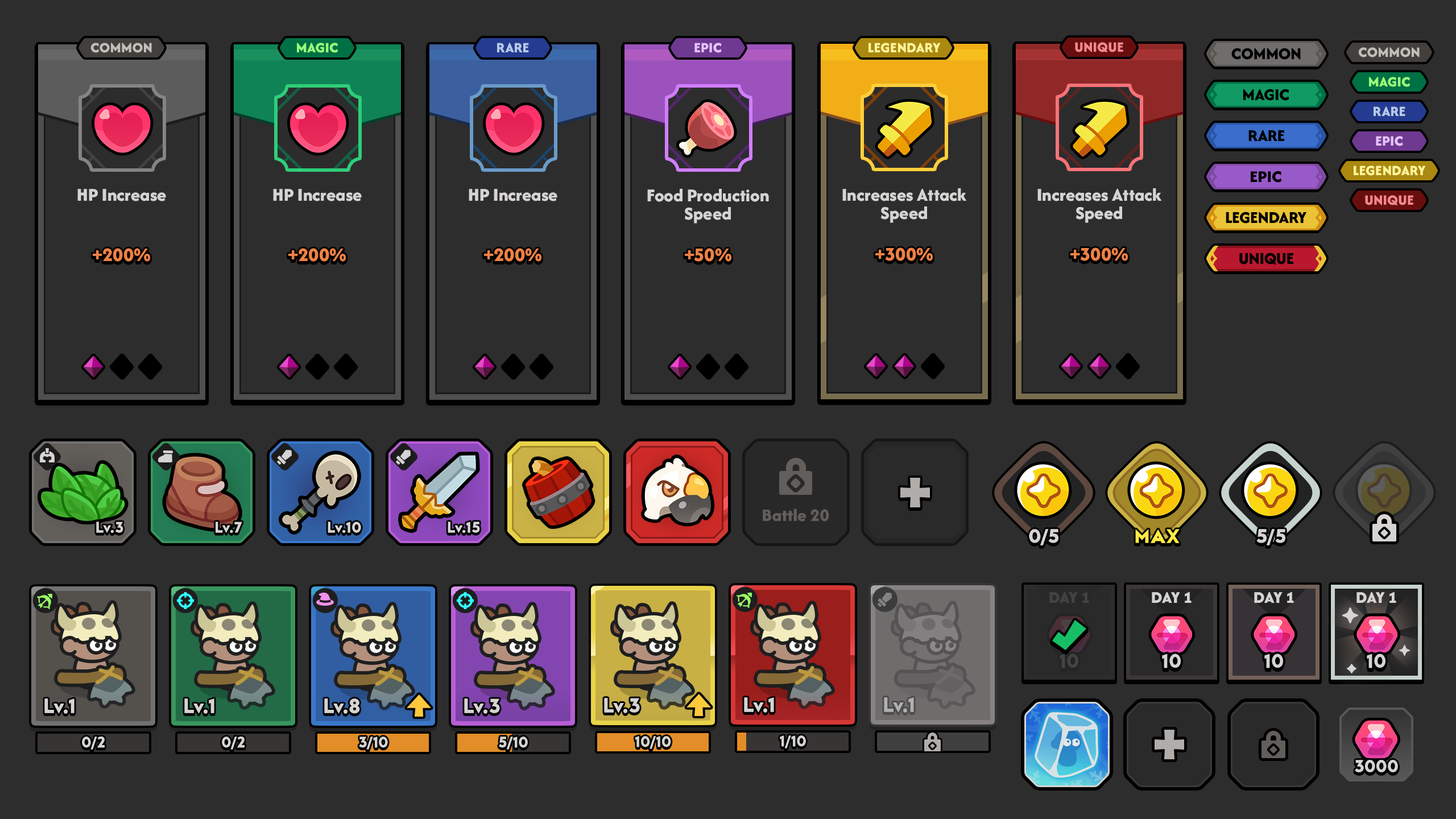
<style>
.page{position:relative;width:1456px;height:819px;background:#2d2d2d}
.page>*{position:absolute;margin:0}
.t1{font:14.8px "AfacadFlux-ExtraBold";color:#c1beba;text-transform:uppercase}
.t2{font:14.8px "AfacadFlux-ExtraBold";color:#99ff79;text-transform:uppercase}
.t3{font:14.8px "AfacadFlux-ExtraBold";color:#b6c8e6;text-transform:uppercase}
.t4{font:14.8px "AfacadFlux-ExtraBold";color:#e6c1ff;text-transform:uppercase}
.t5{font:14.8px "AfacadFlux-ExtraBold";color:#fff59a;text-transform:uppercase}
.t6{font:14.8px "AfacadFlux-ExtraBold";color:#f4868b;text-transform:uppercase}
.t7{font:17.2px "AfacadFlux-ExtraBold";letter-spacing:-0.02em;color:#000000;text-transform:uppercase}
.t8{font:17.1px "AfacadFlux-ExtraBold";color:#000000;text-transform:uppercase}
.t9{font:18.8px "AfacadFlux-ExtraBold";color:#d6d4d3}
.t10{font:18.8px/18.2px "AfacadFlux-ExtraBold";color:#d6d4d3}
.t11{font:19.9px "AfacadFlux-ExtraBold";color:#ee8145;text-transform:uppercase}
.t12{font:18.2px "AfacadFlux-ExtraBold";color:#625e5b}
.t13{font:15.9px "LTAvocado-Bold";color:#d6d4d3}
.t14{font:20.5px "LTAvocado-Bold";color:#d6d4d3;text-transform:uppercase}
.t15{font:20.5px "LTAvocado-Bold";color:#ffeb44;text-transform:uppercase}
.t16{font:17.1px "AfacadFlux-ExtraBold";color:#444343;text-transform:uppercase}
.t17{font:17.1px "AfacadFlux-ExtraBold";color:#d6d4d3;text-transform:uppercase}
.t18{font:20.5px "LTAvocado-Bold";color:#444343}
.t19{font:20.5px "LTAvocado-Bold";color:#d6d4d3}
.t20{font:21.3px "LTAvocado-Bold";color:#d6d4d3}
.t21{font:21.3px "LTAvocado-Bold";color:#b1b0b0}
.t22{font:18.2px "LTAvocado-Bold";color:#d6d4d3;text-transform:uppercase}
</style>
<div class="page">
<p class="t1" style="left:90px;top:43px;width:62px;height:10px">Common</p>
<p class="t2" style="left:297px;top:43px;width:41px;height:10px">Magic</p>
<p class="t3" style="left:497px;top:43px;width:32px;height:9px">Rare</p>
<p class="t4" style="left:694px;top:43px;width:28px;height:10px">Epic</p>
<p class="t5" style="left:868px;top:43px;width:73px;height:10px">Legendary</p>
<p class="t6" style="left:1075px;top:42px;width:48px;height:10px">Unique</p>
<p class="t7" style="left:1231px;top:48px;width:70px;height:12px">Common</p>
<p class="t1" style="left:1358px;top:47px;width:62px;height:10px">Common</p>
<p class="t2" style="left:1369px;top:77px;width:41px;height:10px">Magic</p>
<p class="t7" style="left:1243px;top:89px;width:46px;height:12px">Magic</p>
<p class="t3" style="left:1374px;top:106px;width:31px;height:10px">Rare</p>
<p class="t7" style="left:1248px;top:130px;width:36px;height:11px">Rare</p>
<p class="t4" style="left:1376px;top:136px;width:27px;height:10px">Epic</p>
<p class="t8" style="left:1251px;top:171px;width:31px;height:12px">Epic</p>
<p class="t5" style="left:1354px;top:166px;width:72px;height:10px">Legendary</p>
<p class="t9" style="left:77px;top:189px;width:89px;height:12px">HP Increase</p>
<p class="t9" style="left:273px;top:189px;width:89px;height:12px">HP Increase</p>
<p class="t9" style="left:469px;top:189px;width:88px;height:12px">HP Increase</p>
<p class="t10" style="left:647px;top:189px;width:122px;height:35px;text-align:center">Food Production<br>Speed</p>
<p class="t10" style="left:842px;top:188px;width:125px;height:35px;text-align:center">Increases Attack<br>Speed</p>
<p class="t10" style="left:1037px;top:188px;width:125px;height:35px;text-align:center">Increases Attack<br>Speed</p>
<p class="t6" style="left:1365px;top:195px;width:48px;height:10px">Unique</p>
<p class="t7" style="left:1226px;top:212px;width:81px;height:12px">Legendary</p>
<p class="t11" style="left:93px;top:248px;width:57px;height:14px">+200%</p>
<p class="t11" style="left:288px;top:248px;width:58px;height:14px">+200%</p>
<p class="t11" style="left:484px;top:248px;width:57px;height:14px">+200%</p>
<p class="t11" style="left:685px;top:248px;width:46px;height:14px">+50%</p>
<p class="t11" style="left:875px;top:247px;width:58px;height:14px">+300%</p>
<p class="t11" style="left:1070px;top:247px;width:58px;height:14px">+300%</p>
<p class="t7" style="left:1239px;top:253px;width:54px;height:11px">unique</p>
<p class="t12" style="left:763px;top:508px;width:66px;height:14px">Battle 20</p>
<p class="t13" style="left:96px;top:522px;width:27px;height:11px">Lv.3</p>
<p class="t13" style="left:216px;top:522px;width:26px;height:11px">Lv.7</p>
<p class="t13" style="left:328px;top:522px;width:33px;height:11px">Lv.10</p>
<p class="t13" style="left:448px;top:522px;width:32px;height:11px">Lv.15</p>
<p class="t14" style="left:1029px;top:529px;width:29px;height:16px">0/5</p>
<p class="t15" style="left:1135px;top:529px;width:45px;height:14px">Max</p>
<p class="t14" style="left:1256px;top:529px;width:29px;height:16px">5/5</p>
<p class="t16" style="left:1049px;top:591px;width:40px;height:12px">Day 1</p>
<p class="t17" style="left:1152px;top:591px;width:40px;height:12px">Day 1</p>
<p class="t17" style="left:1254px;top:591px;width:40px;height:12px">Day 1</p>
<p class="t17" style="left:1356px;top:591px;width:40px;height:12px">Day 1</p>
<p class="t18" style="left:1060px;top:653px;width:18px;height:15px">10</p>
<p class="t19" style="left:1162px;top:653px;width:19px;height:15px">10</p>
<p class="t19" style="left:1264px;top:653px;width:19px;height:15px">10</p>
<p class="t19" style="left:1367px;top:653px;width:18px;height:15px">10</p>
<p class="t20" style="left:44px;top:698px;width:31px;height:16px">Lv.1</p>
<p class="t20" style="left:184px;top:698px;width:30px;height:16px">Lv.1</p>
<p class="t20" style="left:324px;top:698px;width:36px;height:16px">Lv.8</p>
<p class="t20" style="left:464px;top:698px;width:36px;height:16px">Lv.3</p>
<p class="t20" style="left:604px;top:698px;width:36px;height:15px">Lv.3</p>
<p class="t20" style="left:744px;top:697px;width:30px;height:16px">Lv.1</p>
<p class="t21" style="left:884px;top:697px;width:30px;height:16px">Lv.1</p>
<p class="t13" style="left:82px;top:737px;width:23px;height:13px">0/2</p>
<p class="t13" style="left:222px;top:737px;width:23px;height:13px">0/2</p>
<p class="t13" style="left:359px;top:737px;width:29px;height:13px">3/10</p>
<p class="t13" style="left:499px;top:737px;width:29px;height:13px">5/10</p>
<p class="t13" style="left:635px;top:736px;width:36px;height:13px">10/10</p>
<p class="t13" style="left:780px;top:735px;width:26px;height:13px">1/10</p>
<p class="t22" style="left:1355px;top:760px;width:43px;height:12px">3000</p>
</div>
